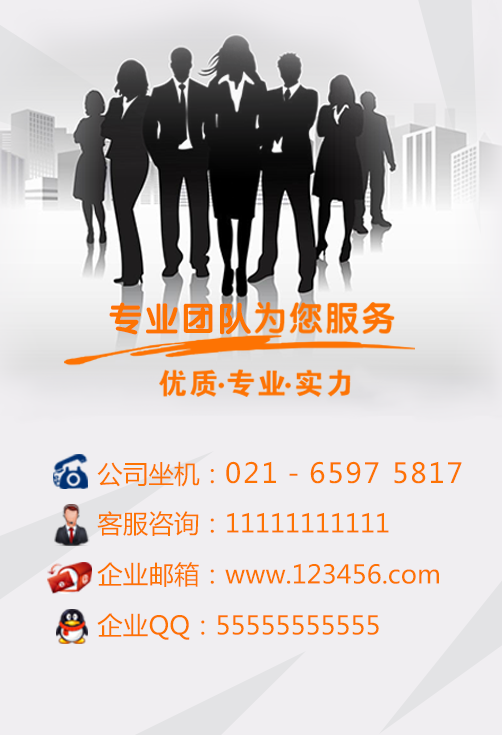
<style>
.page{position:relative;width:502px;height:735px;background:#f0eef1}
.page>*{position:absolute;margin:0}
.t1{font:33.8px "FZY4K--GBK1-0";letter-spacing:0.05em;color:#fd7303;font-weight:bold}
.t2{font:25.5px/51px "MicrosoftYaHei";color:#fd7303}
.t3{font:27.5px/46.1px "MicrosoftYaHei";letter-spacing:0.075em;color:#fd7303}
</style>
<div class="page">
<p class="t1" style="left:109px;top:302px;width:142px;height:33px">专业团队</p>
<p class="t2" style="left:97px;top:461px;width:365px;height:179px">公司坐机：<span class="t3">021－6597 5817<br></span>客服咨询：11111111111<br>企业邮箱：www.123456.com<br>企业QQ：55555555555</p>
</div>
